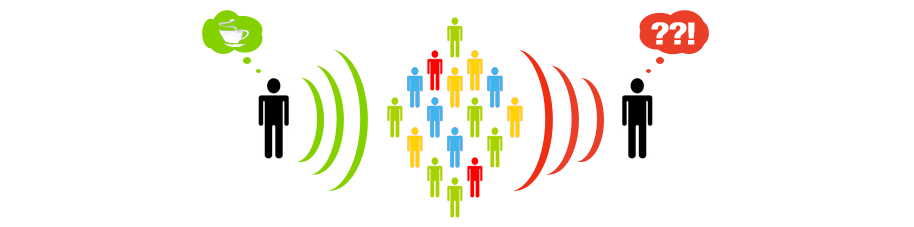
<style>
.page{position:relative;width:914px;height:227px;background:#ffffff}
.page>*{position:absolute;margin:0}
.t1{font:30px "HelveticaNeue-CondensedBold";letter-spacing:-0.05em;color:#ffffff;font-weight:bold;scale:1.28 1}
</style>
<div class="page">
<p class="t1" style="left:651px;top:22px;width:44px;height:23px">??!</p>
</div>
